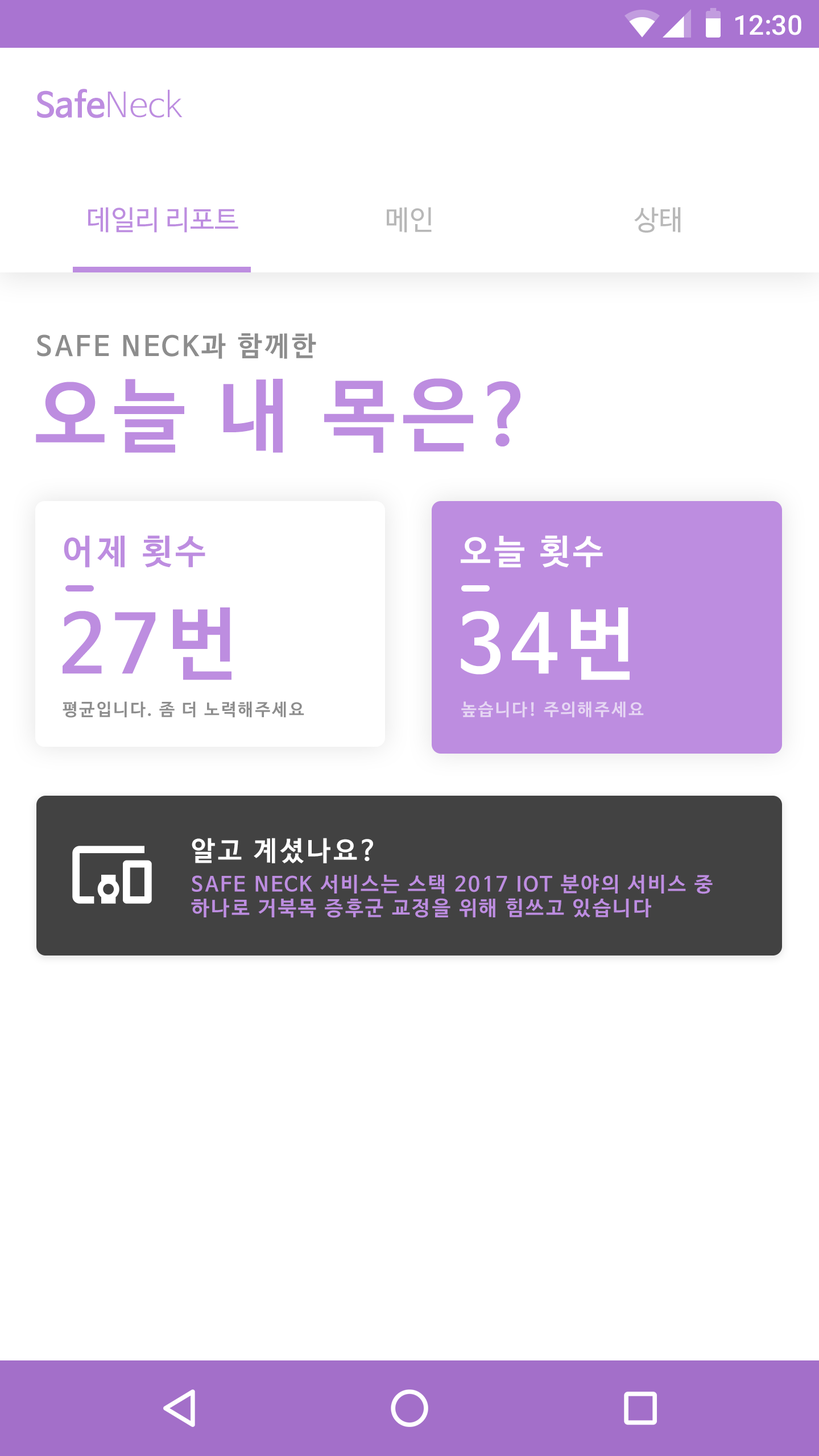
<style>
.page{position:relative;width:819px;height:1456px;background:#ffffff}
.page>*{position:absolute;margin:0}
.t1{font:27.3px "Roboto-Medium";color:#ffffff}
.t2{font:34.1px "NanumBarunGothicBold";color:#bd8de0}
.t3{font:34.1px "NanumBarunGothicLight";color:#bd8de0}
.t4{font:27.3px "NanumBarunGothic";color:#bd8de0}
.t5{font:27.3px "NanumBarunGothic";color:#b8b8b8}
.t6{font:27.3px "NanumBarunGothicBold";letter-spacing:0.1em;color:#8d8d8d}
.t7{font:79.7px "NanumBarunGothicBold";letter-spacing:0.1em;color:#bd8de0}
.t8{font:34.1px "NanumBarunGothicBold";letter-spacing:0.1em;color:#bd8de0}
.t9{font:34.1px "NanumBarunGothicBold";letter-spacing:0.1em;color:#ffffff}
.t10{font:79.6px "NanumBarunGothicBold";letter-spacing:0.1em;color:#bd8de0}
.t11{font:79.6px "NanumBarunGothicBold";letter-spacing:0.1em;color:#ffffff}
.t12{font:17.1px "NanumBarunGothicBold";letter-spacing:0.1em;color:#8d8d8d}
.t13{font:17.1px "NanumBarunGothicBold";letter-spacing:0.1em;color:#e6d6f3}
.t14{font:26.9px "NanumBarunGothicBold";letter-spacing:0.1em;color:#ffffff}
.t15{font:20.3px "NanumBarunGothicBold";letter-spacing:0.1em;color:#bd8de0}
</style>
<div class="page">
<p class="t1" style="left:735px;top:15px;width:66px;height:20px">12:30</p>
<p class="t2" style="left:37px;top:89px;width:146px;height:29px">Safe<span class="t3">Neck</span></p>
<p class="t4" style="left:88px;top:207px;width:150px;height:26px">데일리 리포트</p>
<p class="t5" style="left:387px;top:207px;width:45px;height:26px">메인</p>
<p class="t5" style="left:634px;top:207px;width:47px;height:26px">상태</p>
<p class="t6" style="left:37px;top:333px;width:279px;height:26px">SAFE NECK과 함께한</p>
<p class="t7" style="left:36px;top:378px;width:484px;height:75px">오늘 내 목은?</p>
<p class="t8" style="left:64px;top:535px;width:141px;height:33px">어제 횟수</p>
<p class="t9" style="left:461px;top:535px;width:142px;height:33px">오늘 횟수</p>
<p class="t10" style="left:63px;top:607px;width:168px;height:73px">27번</p>
<p class="t11" style="left:461px;top:607px;width:169px;height:73px">34번</p>
<p class="t12" style="left:63px;top:701px;width:241px;height:17px">평균입니다. 좀 더 노력해주세요</p>
<p class="t13" style="left:461px;top:701px;width:183px;height:17px">높습니다! 주의해주세요</p>
<p class="t14" style="left:192px;top:838px;width:181px;height:25px">알고 계셨나요?</p>
<p class="t15" style="left:191px;top:875px;width:522px;height:43px">SAFE NECK 서비스는 스택 2017 IOT 분야의 서비스 중<br>하나로 거북목 증후군 교정을 위해 힘쓰고 있습니다</p>
</div>
